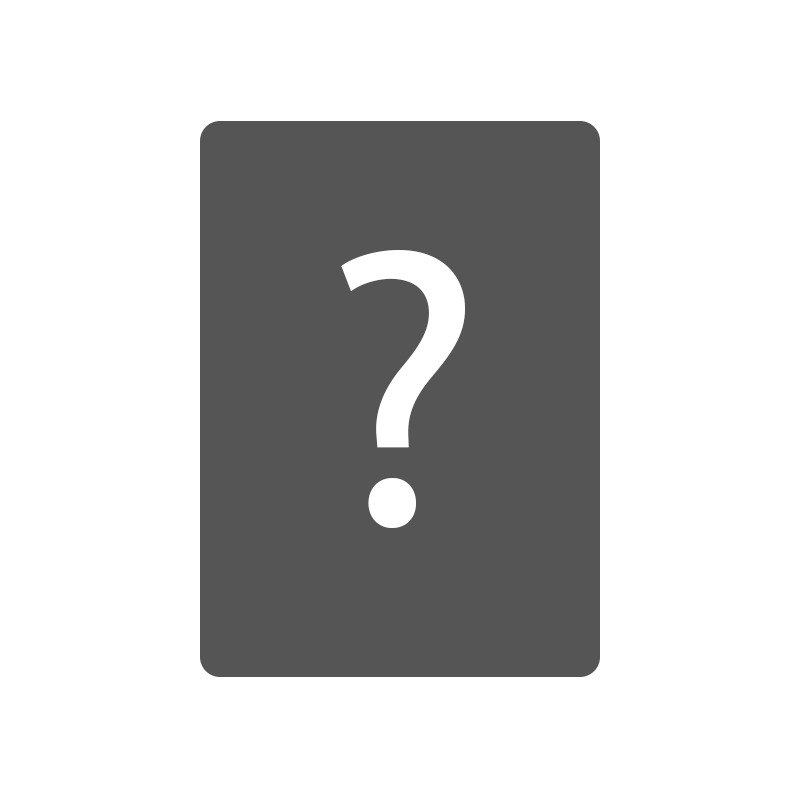
<style>
.page{position:relative;width:800px;height:800px;background:#ffffff}
.page>*{position:absolute;margin:0}
.t1{font:400px "MyriadPro-Regular";color:#ffffff}
</style>
<div class="page">
<p class="t1" style="left:341px;top:250px;width:124px;height:278px">?</p>
</div>
